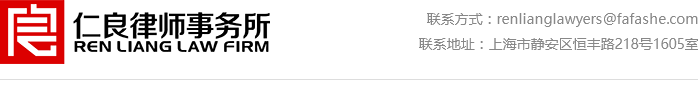
<style>
.page{position:relative;width:698px;height:95px;background:#ffffff}
.page>*{position:absolute;margin:0}
.t1{font:14px "MicrosoftYaHei";color:#888888}
</style>
<div class="page">
<p class="t1" style="left:419px;top:13px;width:280px;height:37px;text-align:right">联系方式：renlianglawyers@fafashe.com<br>联系地址：上海市静安区恒丰路218号1605室</p>
</div>
